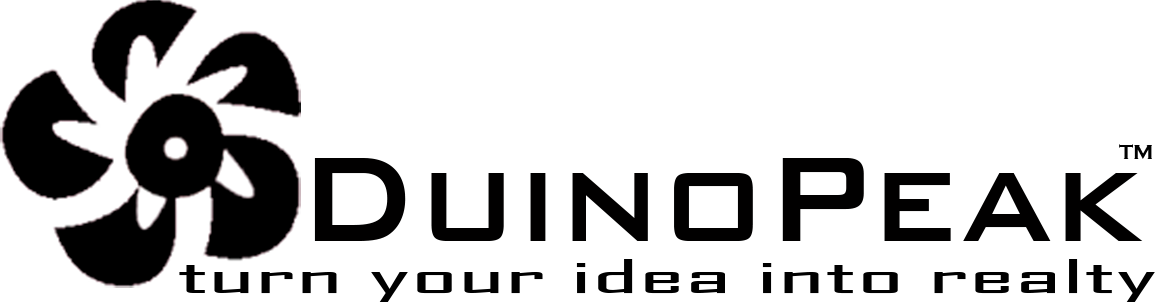
<style>
.page{position:relative;width:1172px;height:303px;background:#ffffff}
.page>*{position:absolute;margin:0}
.t1{font:20.7px "CopperplateGothic-Bold";color:#000000}
.t2{font:160.4px "BankGothicBT-Medium";color:#010000;scale:0.9 1}
.t3{font:44.6px "AgencyFB-Reg";color:#000000;scale:2.78 1}
</style>
<div class="page">
<p class="t1" style="left:1119px;top:144px;width:33px;height:15px">TM</p>
<p class="t2" style="left:314px;top:158px;width:829px;height:83px">DuinoPeak</p>
<p class="t3" style="left:179px;top:259px;width:976px;height:43px">turn your idea into realty</p>
</div>
